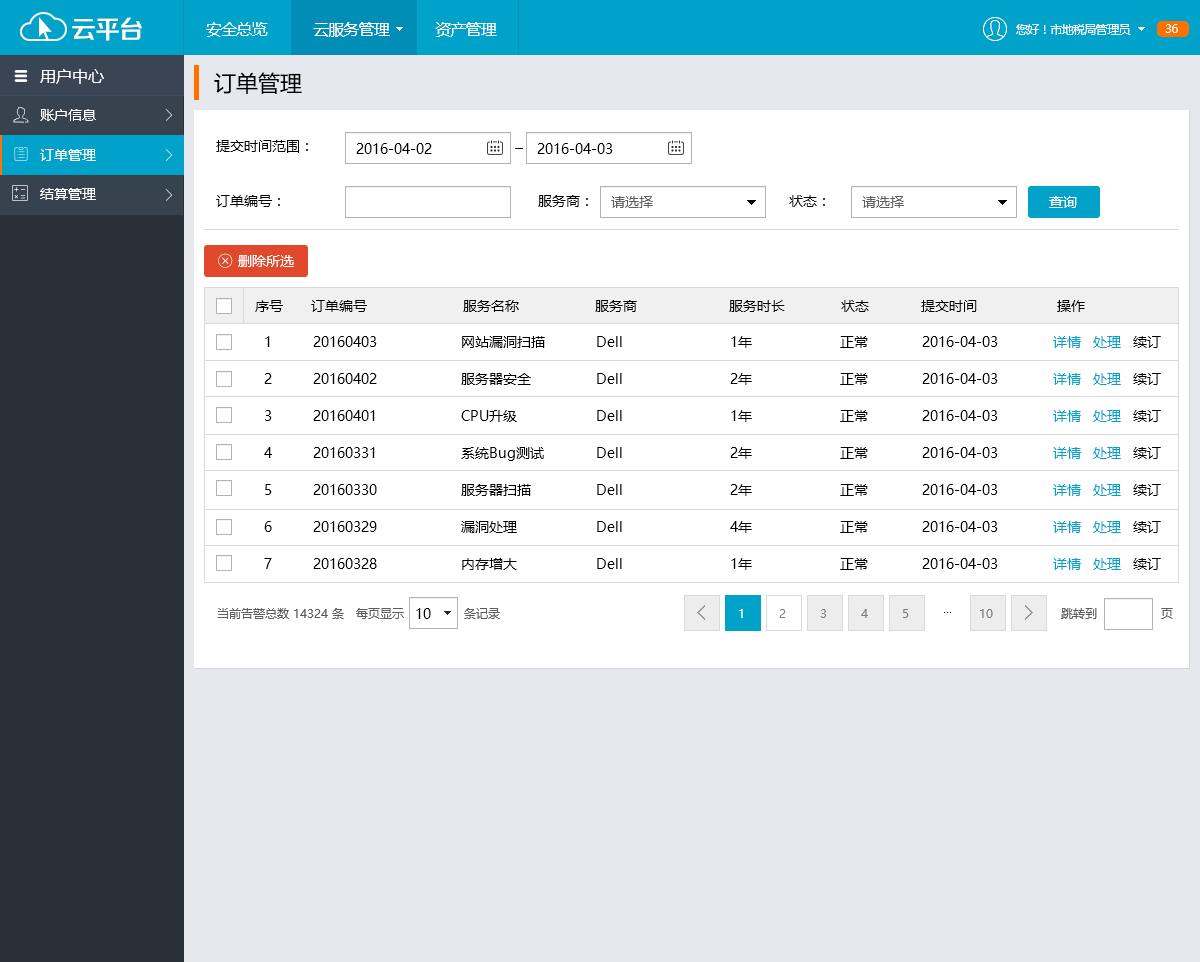
<style>
.page{position:relative;width:1200px;height:962px;background:#ffffff}
.page>*{position:absolute;margin:0}
.t1{font:25.4px "FZZZHONGJW--GB1-0";letter-spacing:-0.05em;color:#ffffff}
.t2{font:16px "MicrosoftYaHei";letter-spacing:-0.05em;color:#ffffff}
.t3{font:12px "MicrosoftYaHei";letter-spacing:-0.05em;color:#ffffff}
.t4{font:16px "MicrosoftYaHei";color:#ffffff}
.t5{font:22px "MicrosoftYaHei";color:#000000}
.t6{font:14px "MicrosoftYaHei";color:#ffffff}
.t7{font:14px "MicrosoftYaHei";color:#000000}
.t8{font:14px "MicrosoftYaHei";color:#5e5e5e}
.t9{font:14px/37px "MicrosoftYaHei";color:#000000}
.t10{font:14px/37px "MicrosoftYaHei";color:#00a2ca}
</style>
<div class="page">
<p class="t1" style="left:72px;top:17px;width:70px;height:24px">云平台</p>
<p class="t2" style="left:206px;top:22px;width:291px;height:15px">安全总览           云服务管理           资产管理</p>
<p class="t3" style="left:1016px;top:24px;width:115px;height:11px">您好！市地税局管理员</p>
<p class="t3" style="left:1165px;top:24px;width:13px;height:9px">36</p>
<p class="t4" style="left:40px;top:69px;width:64px;height:15px">用户中心</p>
<p class="t5" style="left:214px;top:72px;width:88px;height:22px">订单管理</p>
<p class="t6" style="left:40px;top:109px;width:56px;height:12px">账户信息</p>
<p class="t6" style="left:40px;top:149px;width:56px;height:12px">订单管理</p>
<p class="t7" style="left:216px;top:140px;width:92px;height:13px">提交时间范围：</p>
<p class="t7" style="left:356px;top:143px;width:76px;height:11px">2016-04-02</p>
<p class="t7" style="left:537px;top:143px;width:76px;height:11px">2016-04-03</p>
<p class="t6" style="left:40px;top:188px;width:56px;height:12px">结算管理</p>
<p class="t7" style="left:216px;top:195px;width:64px;height:12px">订单编号：</p>
<p class="t7" style="left:538px;top:195px;width:50px;height:12px">服务商：</p>
<p class="t8" style="left:611px;top:196px;width:42px;height:12px">请选择</p>
<p class="t7" style="left:789px;top:195px;width:36px;height:12px">状态：</p>
<p class="t8" style="left:862px;top:196px;width:42px;height:12px">请选择</p>
<p class="t6" style="left:1049px;top:196px;width:28px;height:12px">查询</p>
<p class="t6" style="left:238px;top:255px;width:56px;height:12px">删除所选</p>
<p class="t7" style="left:255px;top:300px;width:830px;height:12px">序号       订单编号                        服务名称                   服务商                       服务时长              状态             提交时间                    操作</p>
<p class="t9" style="left:264px;top:336px;width:8px;height:233px">1<br>2<br>3<br>4<br>5<br>6<br>7</p>
<p class="t9" style="left:313px;top:336px;width:64px;height:233px">20160403<br>20160402<br>20160401<br>20160331<br>20160330<br>20160329<br>20160328</p>
<p class="t9" style="left:461px;top:336px;width:84px;height:234px">网站漏洞扫描<br>服务器安全<br>CPU升级<br>系统Bug测试<br>服务器扫描<br>漏洞处理<br>内存增大</p>
<p class="t9" style="left:597px;top:336px;width:25px;height:233px">Dell<br>Dell<br>Dell<br>Dell<br>Dell<br>Dell<br>Dell</p>
<p class="t9" style="left:730px;top:336px;width:22px;height:234px">1年<br>2年<br>1年<br>2年<br>2年<br>4年<br>1年</p>
<p class="t9" style="left:840px;top:336px;width:28px;height:234px">正常<br>正常<br>正常<br>正常<br>正常<br>正常<br>正常</p>
<p class="t9" style="left:922px;top:336px;width:76px;height:233px">2016-04-03<br>2016-04-03<br>2016-04-03<br>2016-04-03<br>2016-04-03<br>2016-04-03<br>2016-04-03</p>
<p class="t10" style="left:1053px;top:336px;width:108px;height:234px">详情   处理   <span class="t9">续订<br></span>详情   处理   <span class="t9">续订<br></span>详情   处理   <span class="t9">续订<br></span>详情   处理   <span class="t9">续订<br></span>详情   处理   <span class="t9">续订<br></span>详情   处理   <span class="t9">续订<br></span>详情   处理   <span class="t9">续订</span></p>
</div>
